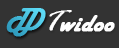
<style>
.page{position:relative;width:119px;height:48px;background:#333333}
.page>*{position:absolute;margin:0}
.t1{font:26.7px "HarlowSolid";letter-spacing:-0.4em;text-transform:uppercase;font-weight:bold;font-style:italic}
.t2{font:24px "HarlowSolid";color:#fefefe;font-weight:bold;font-style:italic}
.t3{font:30px "RageItalic";color:#fefefe;font-weight:bold;font-style:italic}
</style>
<div class="page">
<p class="t1" style="left:6px;top:8px;width:40px;height:29px">TD</p>
<p class="t2" style="left:49px;top:10px;width:66px;height:22px"><span class="t3">T</span>widoo</p>
</div>
